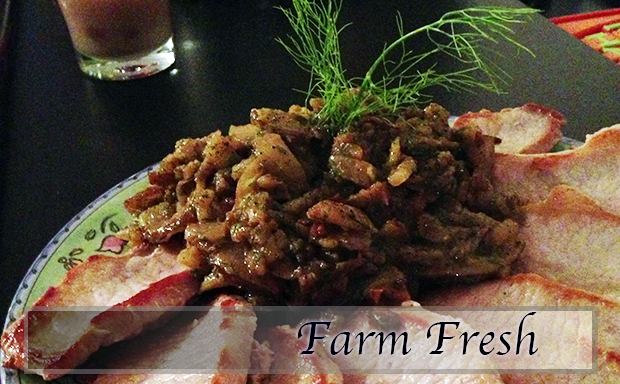
<style>
.page{position:relative;width:620px;height:384px}
.page>*{position:absolute;margin:0}
.t1{font:48px "Apple-Chancery";color:#000000}
</style>
<div class="page">
<p class="t1" style="left:297px;top:312px;width:241px;height:43px">Farm Fresh</p>
</div>
